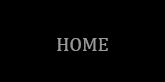
<style>
.page{position:relative;width:165px;height:82px;background:#000000}
.page>*{position:absolute;margin:0}
.t1{font:19.1px "Cambria";color:#999999}
</style>
<div class="page">
<p class="t1" style="left:57px;top:38px;width:51px;height:13px">HOME</p>
</div>
